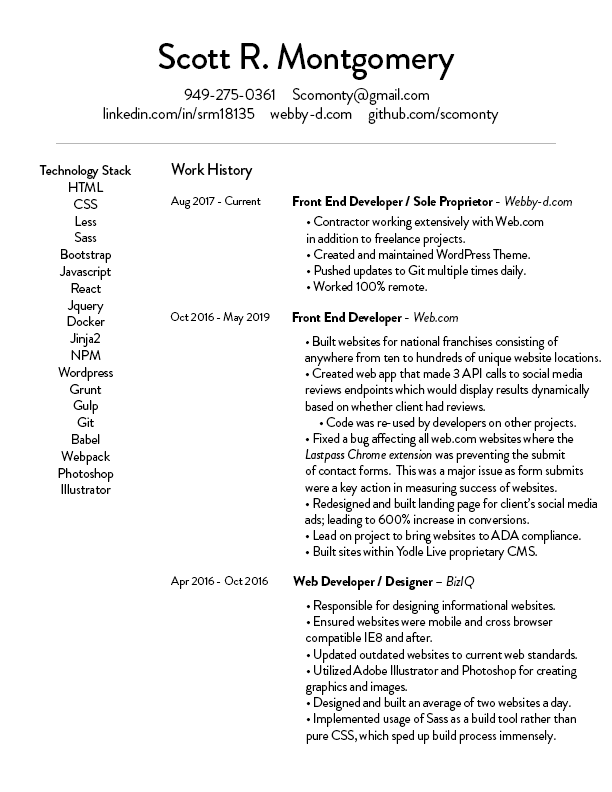
<style>
.page{position:relative;width:612px;height:792px;background:#ffffff}
.page>*{position:absolute;margin:0}
.t1{font:36px "BrandonGrotesque-Medium";letter-spacing:-0.02em;color:#000000}
.t2{font:16px "BrandonGrotesque-Regular";letter-spacing:-0.02em;color:#000000}
.t3{font:14px "BrandonGrotesque-Regular";letter-spacing:-0.02em;color:#000000}
.t4{font:14px "BrandonGrotesque-Medium";letter-spacing:-0.02em;color:#000000}
.t5{font:16px "BrandonGrotesque-Medium";letter-spacing:-0.02em;color:#000000}
.t6{font:12px "BrandonGrotesque-Regular";letter-spacing:-0.02em;color:#000000}
.t7{font:14px "BrandonGrotesque-Black";letter-spacing:-0.02em;color:#000000}
.t8{font:14px "BrandonGrotesque-RegularItalic";letter-spacing:-0.02em;color:#000000}
.t9{font:13.5px "BrandonGrotesque-Regular";letter-spacing:-0.02em;color:#000000}
.t10{font:13.5px "BrandonGrotesque-RegularItalic";letter-spacing:-0.02em;color:#000000}
</style>
<div class="page">
<p class="t1" style="left:158px;top:43px;width:297px;height:37px">Scott R. Montgomery</p>
<p class="t2" style="left:103px;top:88px;width:396px;height:36px;text-align:center">949-275-0361     Scomonty@gmail.com<br>linkedin.com/in/srm18135     webby-d.com     github.com/scomonty</p>
<p class="t3" style="left:39px;top:165px;width:93px;height:329px;text-align:center"><span class="t4">Technology Stack<br></span>HTML<br>CSS<br>Less<br>Sass<br>Bootstrap<br>Javascript<br>React<br>Jquery<br>Docker<br>Jinja2<br>NPM<br>Wordpress<br>Grunt<br>Gulp<br>Git<br>Babel<br>Webpack<br>Photoshop<br>Illustrator</p>
<p class="t5" style="left:171px;top:163px;width:82px;height:17px">Work History</p>
<p class="t6" style="left:171px;top:196px;width:90px;height:13px">Aug 2017 - Current</p>
<p class="t7" style="left:293px;top:196px;width:279px;height:14px">Front End Developer / Sole Proprietor<span class="t3"> - </span><span class="t8">Webby-d.com</span></p>
<p class="t9" style="left:307px;top:216px;width:237px;height:75px">• Contractor working extensively with Web.com<br>in addition to freelance projects.<br>• Created and maintained WordPress Theme.<br>• Pushed updates to Git multiple times daily.<br>• Worked 100% remote.</p>
<p class="t6" style="left:170px;top:312px;width:100px;height:13px">Oct 2016 - May 2019</p>
<p class="t7" style="left:292px;top:312px;width:166px;height:14px">Front End Developer<span class="t3"> - </span><span class="t8">Web.com</span></p>
<p class="t9" style="left:305px;top:336px;width:296px;height:224px"><span class="t10">•</span> Built websites for national franchises consisting of<br>anywhere from ten to hundreds of unique website locations.<br>• Created web app that made 3 API calls to social media<br>reviews endpoints which would display results dynamically<br>based on whether client had reviews.<br>     • Code was re-used by developers on other projects.<br>• Fixed a bug affecting all web.com websites where the <br><span class="t10">Lastpass Chrome extension</span> was preventing the submit<br>of contact forms.  This was a major issue as form submits<br>were a key action in measuring success of websites.<br>• Redesigned and built landing page for client’s social media<br>ads; leading to 600% increase in conversions.<br>• Lead on project to bring websites to ADA compliance.<br>• Built sites within Yodle Live proprietary CMS.</p>
<p class="t6" style="left:171px;top:576px;width:97px;height:13px">Apr 2016 - Oct 2016</p>
<p class="t7" style="left:293px;top:576px;width:182px;height:14px">Web Developer / Designer<span class="t3"> – </span><span class="t8">BizIQ</span></p>
<p class="t9" style="left:306px;top:600px;width:271px;height:144px">• Responsible for designing informational websites.<br>• Ensured websites were mobile and cross browser<br>compatible IE8 and after.<br>• Updated outdated websites to current web standards.<br>• Utilized Adobe Illustrator and Photoshop for creating<br>graphics and images.<br>• Designed and built an average of two websites a day.<br>• Implemented usage of Sass as a build tool rather than<br>pure CSS, which sped up build process immensely.</p>
</div>
